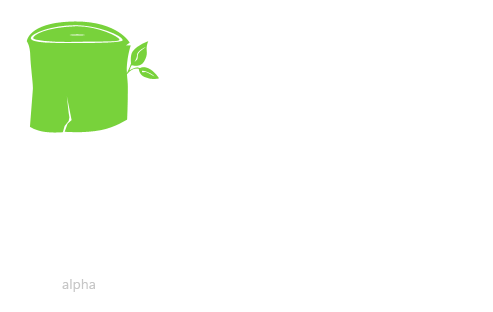
<style>
.page{position:relative;width:493px;height:312px;background:#ffffff}
.page>*{position:absolute;margin:0}
.t1{font:14px "SegoeUI";color:#c7c7c7}
</style>
<div class="page">
<p class="t1" style="left:62px;top:279px;width:33px;height:13px">alpha</p>
</div>
